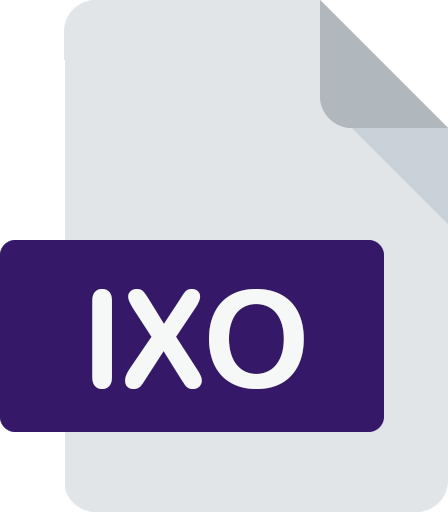
<style>
.page{position:relative;width:448px;height:512px;background:#e2e5e7}
.page>*{position:absolute;margin:0}
.t1{font:135px "ArialRoundedMTBold";color:#f6f8f8}
</style>
<div class="page">
<p class="t1" style="left:92px;top:289px;width:212px;height:100px">IXO</p>
</div>
